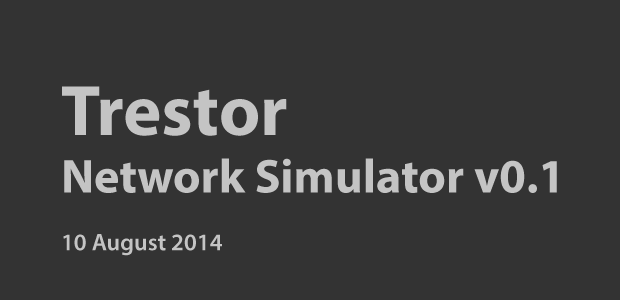
<style>
.page{position:relative;width:620px;height:300px;background:#333333}
.page>*{position:absolute;margin:0}
.t1{font:48px "MyriadPro-Bold";color:#c4c4c4}
.t2{font:72px "MyriadPro-Bold";color:#c4c4c4}
.t3{font:24px "MyriadPro-Semibold";color:#c4c4c4}
</style>
<div class="page">
<p class="t1" style="left:62px;top:86px;width:495px;height:170px"><span class="t2">Trestor <br></span>Network Simulator v0.1<br><span class="t3"><br>10 August 2014</span></p>
</div>
